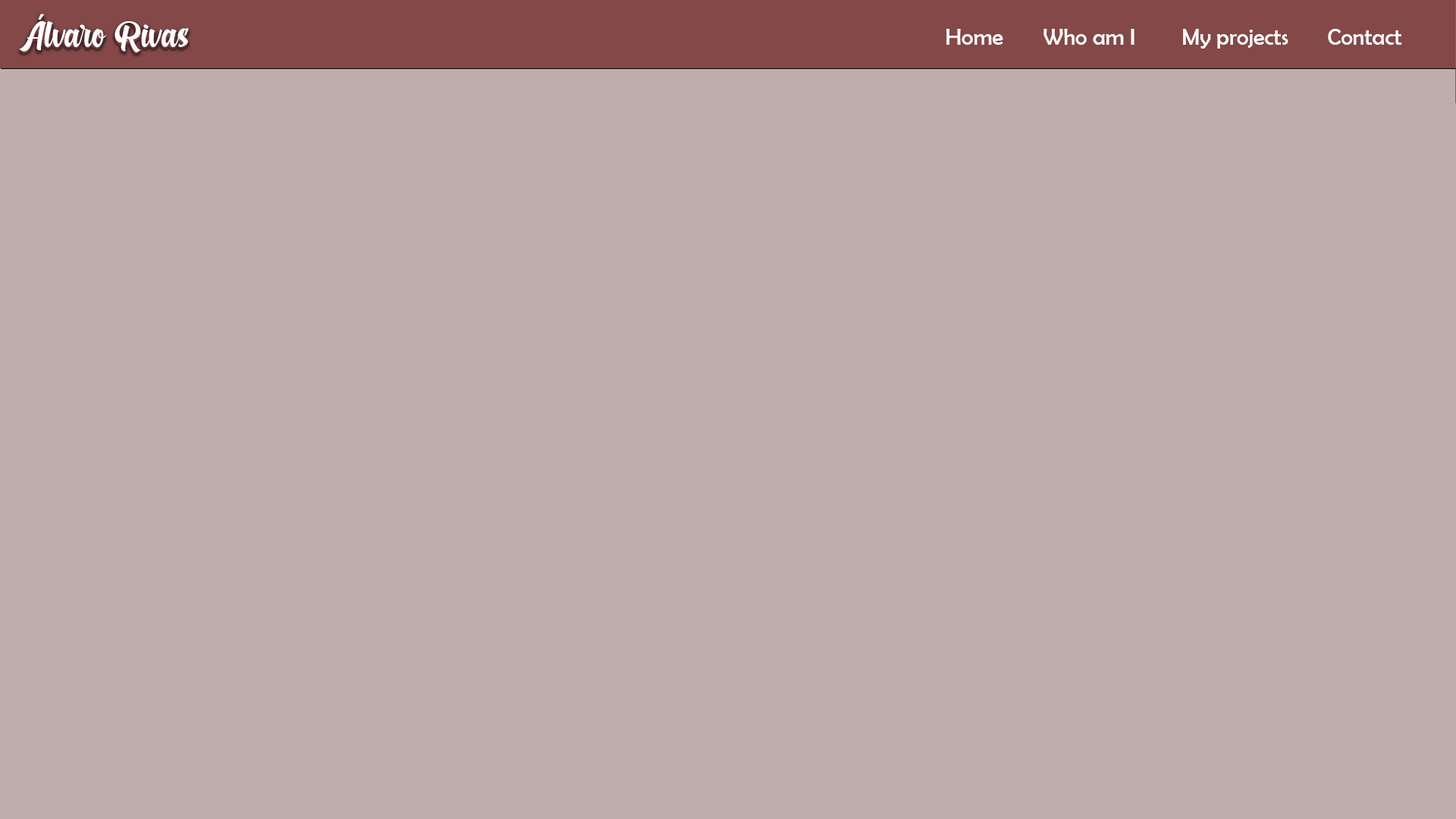
<style>
.page{position:relative;width:1456px;height:819px;background:#bfadad}
.page>*{position:absolute;margin:0}
.t1{font:29.6px "Dalgona";color:#fefefe}
.t2{font:22.7px "BerlinSansFB-Reg";color:#fefefe}
</style>
<div class="page">
<p class="t1" style="left:19px;top:14px;width:170px;height:38px">Álvaro Rivas</p>
<p class="t2" style="left:946px;top:29px;width:57px;height:16px">Home</p>
<p class="t2" style="left:1043px;top:29px;width:91px;height:16px">Who am I</p>
<p class="t2" style="left:1183px;top:29px;width:105px;height:20px">My projects</p>
<p class="t2" style="left:1328px;top:29px;width:74px;height:16px">Contact</p>
</div>
